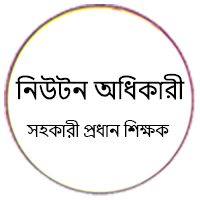
<style>
.page{position:relative;width:200px;height:200px;background:#ffffff}
.page>*{position:absolute;margin:0}
.t1{font:23.6px "NirmalaUI";color:#000000}
.t2{font:15.6px "NirmalaUI";color:#000000}
</style>
<div class="page">
<p class="t1" style="left:15px;top:73px;width:170px;height:27px">নিউটন অধিকারী</p>
<p class="t2" style="left:26px;top:120px;width:144px;height:18px">সহকারী প্রধান শিক্ষক</p>
</div>
